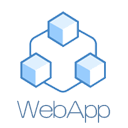
<style>
.page{position:relative;width:128px;height:128px;background:#ffffff}
.page>*{position:absolute;margin:0}
.t1{font:25px "HanWangYenLight";color:#5c84ac;scale:1.06 1}
</style>
<div class="page">
<p class="t1" style="left:17px;top:100px;width:94px;height:23px">WebApp</p>
</div>
